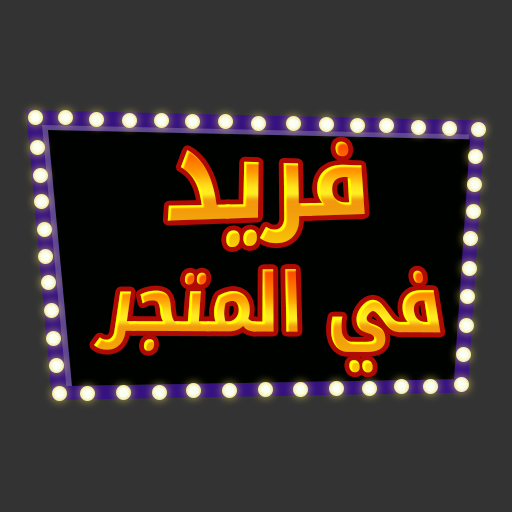
<style>
.page{position:relative;width:512px;height:512px;background:#333333}
.page>*{position:absolute;margin:0}
.t1{font:109.8px "DroidArabicKufi-Bold";letter-spacing:-0.025em;scale:0.89 1}
.t2{font:81.6px "DroidArabicKufi-Bold";letter-spacing:-0.025em;scale:0.89 1}
</style>
<div class="page">
<p class="t1" style="left:167px;top:141px;width:198px;height:106px">ﺪﻳﺮﻓ</p>
<p class="t2" style="left:94px;top:269px;width:347px;height:104px">ﺮﺠﺘﻤﻟﺍ ﻲﻓ</p>
</div>
